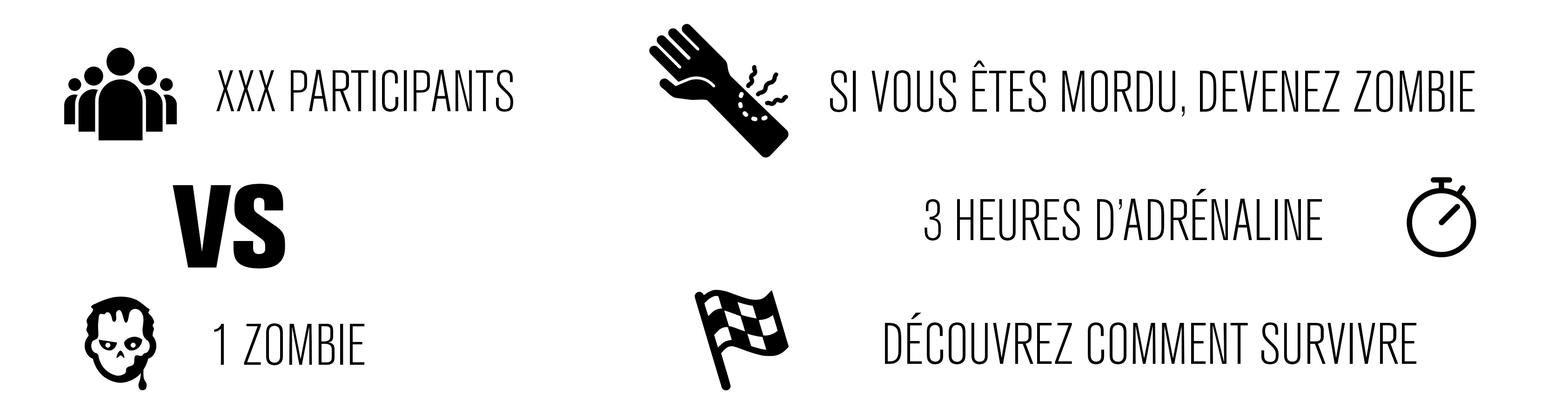
<style>
.page{position:relative;width:1568px;height:415px;background:#ffffff}
.page>*{position:absolute;margin:0}
.t1{font:58.2px "AkzidenzGroteskBQ-LigCnd";color:#000000}
.t2{font:116.3px "AkzidenzGroteskBQ-XBdCnd";color:#000000}
</style>
<div class="page">
<p class="t1" style="left:830px;top:60px;width:645px;height:57px">SI VOUS ÊTES MORDU, DEVENEZ ZOMBIE</p>
<p class="t1" style="left:216px;top:70px;width:297px;height:42px">XXX PARTICIPANTS</p>
<p class="t2" style="left:173px;top:184px;width:112px;height:84px">VS</p>
<p class="t1" style="left:925px;top:189px;width:397px;height:52px">3 HEURES D’ADRÉNALINE</p>
<p class="t1" style="left:885px;top:313px;width:532px;height:52px">DÉCOUVREZ COMMENT SURVIVRE</p>
<p class="t1" style="left:214px;top:323px;width:151px;height:42px">1 ZOMBIE</p>
</div>
